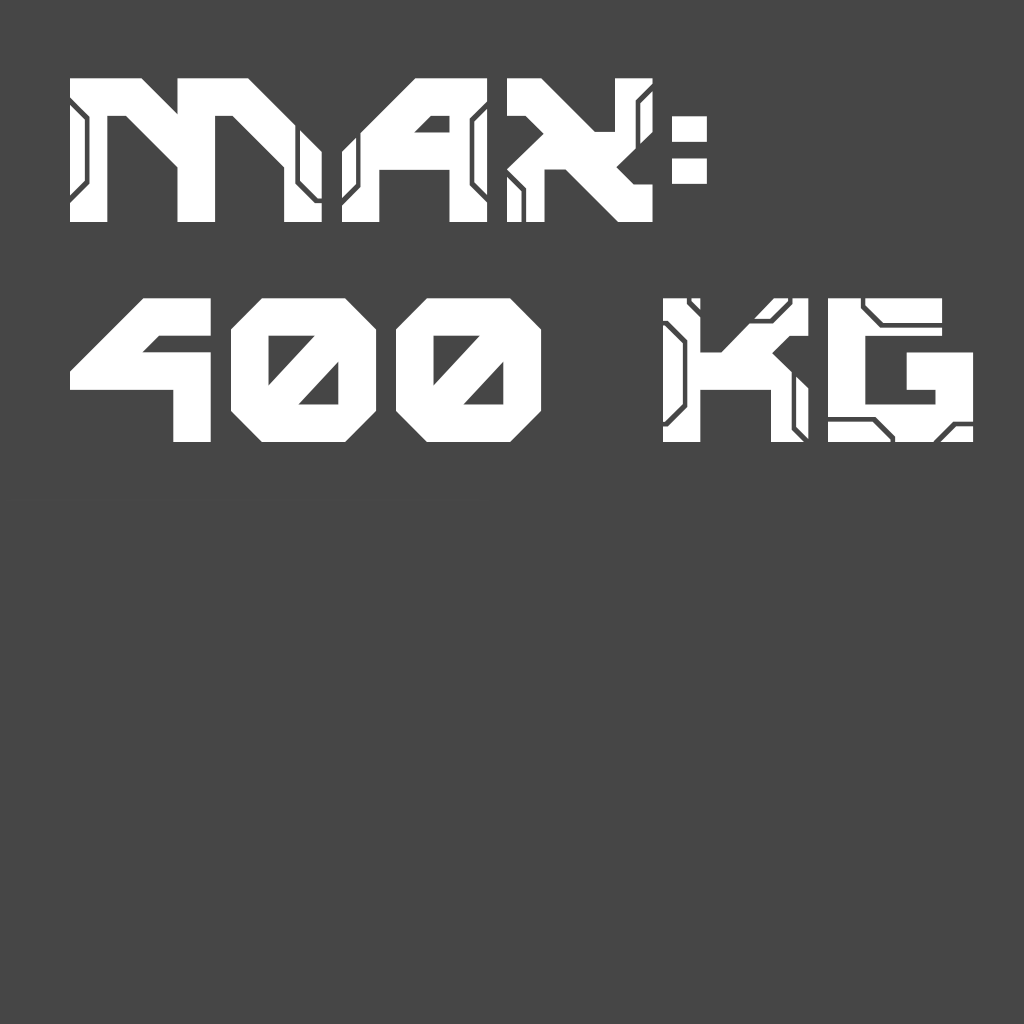
<style>
.page{position:relative;width:1024px;height:1024px;background:#464646}
.page>*{position:absolute;margin:0}
.t1{font:200px "valorax";color:#ffffff}
</style>
<div class="page">
<p class="t1" style="left:70px;top:78px;width:637px;height:144px">MAX:</p>
<p class="t1" style="left:70px;top:298px;width:904px;height:144px">400 KG</p>
</div>
